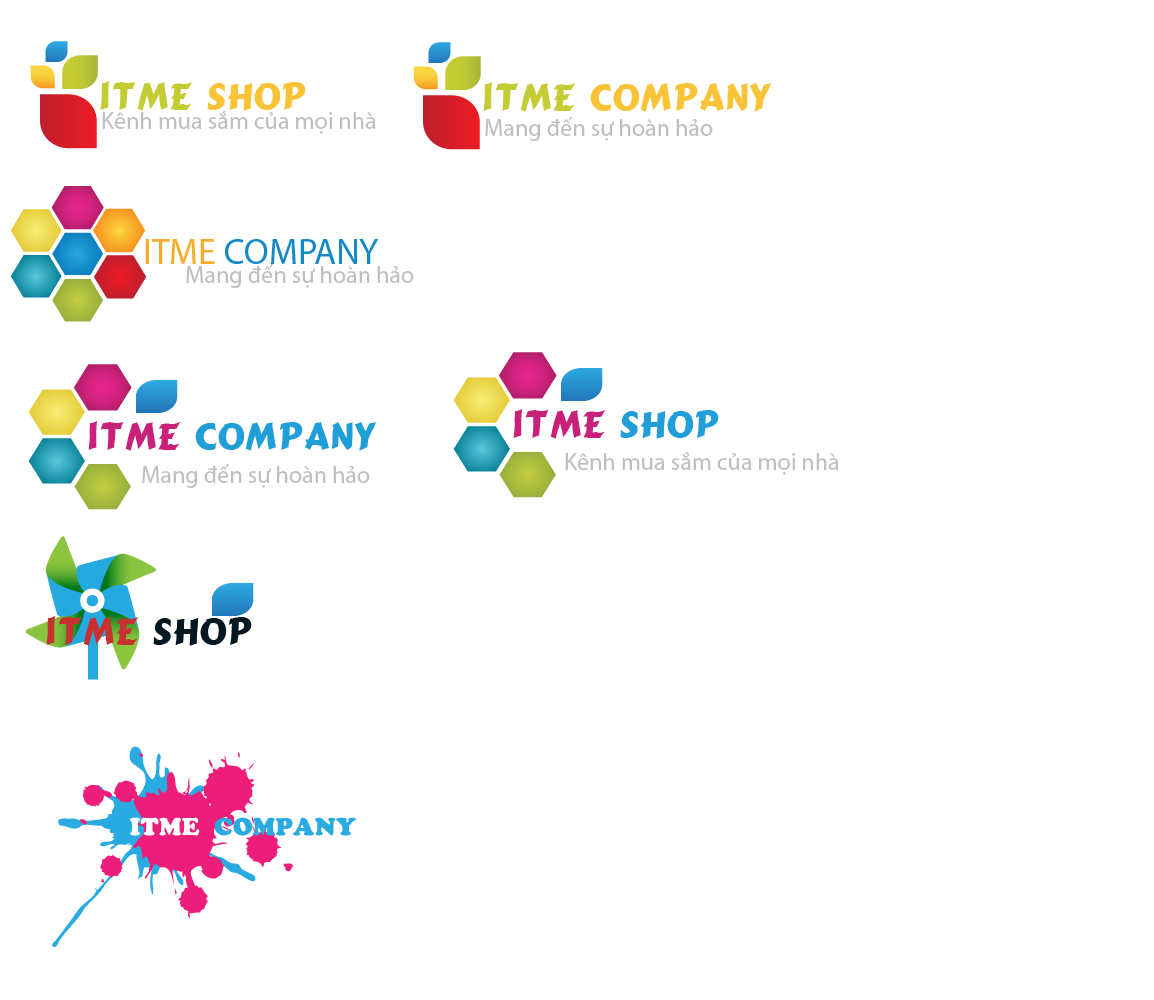
<style>
.page{position:relative;width:1154px;height:1000px;background:#ffffff}
.page>*{position:absolute;margin:0}
.t1{font:36px "NVTCanCunBold";color:#c4cc33}
.t2{font:36px "NVTCanCunBold";color:#f8c336}
.t3{font:24px "MyriadPro-Regular";color:#bfbfbf}
.t4{font:36px "MyriadPro-Regular";color:#138ac7}
.t5{font:36px "MyriadPro-Regular";color:#f8ac2b}
.t6{font:36px "NVTCanCunBold";color:#c82179}
.t7{font:36px "NVTCanCunBold";color:#1f9ed8}
.t8{font:36px "NVTCanCunBold";color:#c93131}
.t9{font:36px "NVTCanCunBold";color:#011823}
.t10{font:24px "VNI-Cooper-Heavy";color:#29abe2}
.t11{font:24px "VNI-Cooper-Heavy";color:#ffffff}
</style>
<div class="page">
<p class="t1" style="left:100px;top:81px;width:206px;height:30px">ITME <span class="t2">SHOP</span></p>
<p class="t2" style="left:483px;top:82px;width:288px;height:30px"><span class="t1">ITME </span>COMPANY</p>
<p class="t3" style="left:102px;top:110px;width:274px;height:24px">Kênh mua sắm của mọi nhà</p>
<p class="t3" style="left:485px;top:117px;width:228px;height:24px">Mang đến sự hoàn hảo</p>
<p class="t4" style="left:145px;top:239px;width:234px;height:25px"><span class="t5">ITME </span>COMPANY</p>
<p class="t3" style="left:186px;top:264px;width:228px;height:24px">Mang đến sự hoàn hảo</p>
<p class="t6" style="left:513px;top:409px;width:206px;height:30px">ITME<span class="t7"> SHOP</span></p>
<p class="t7" style="left:88px;top:421px;width:288px;height:30px"><span class="t6">ITME</span> COMPANY</p>
<p class="t3" style="left:565px;top:451px;width:274px;height:24px">Kênh mua sắm của mọi nhà</p>
<p class="t3" style="left:142px;top:464px;width:228px;height:24px">Mang đến sự hoàn hảo</p>
<p class="t8" style="left:46px;top:616px;width:206px;height:30px">ITME <span class="t9">SHOP</span></p>
<p class="t10" style="left:130px;top:817px;width:226px;height:19px"><span class="t11">ITME  </span>COMPANY</p>
</div>
